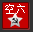
<style>
.page{position:relative;width:33px;height:32px;background:#c50000}
.page>*{position:absolute;margin:0}
.t1{font:10.8px "SimSun";color:#ffffff}
</style>
<div class="page">
<p class="t1" style="left:5px;top:4px;width:20px;height:10px">空六</p>
</div>
